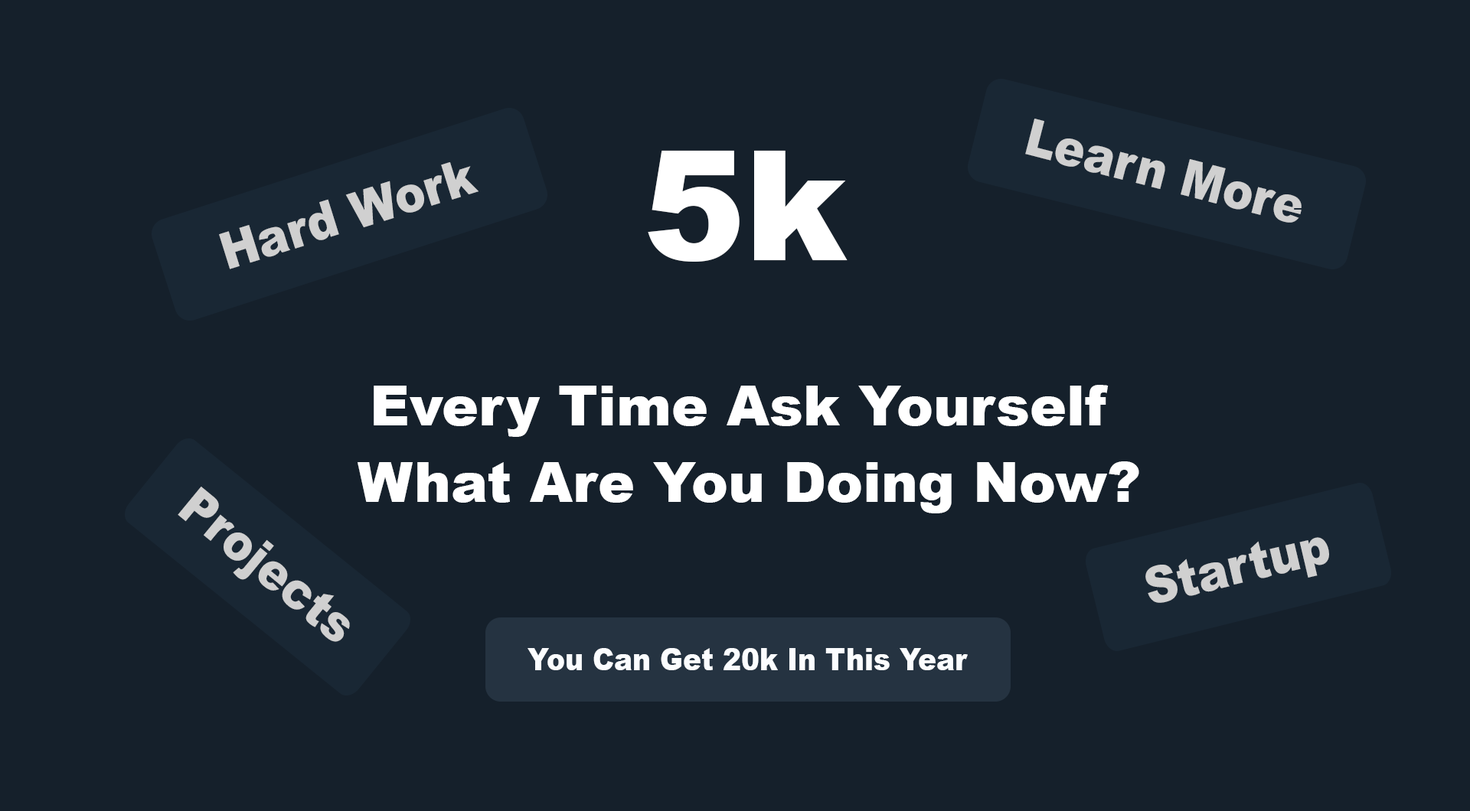
<style>
.page{position:relative;width:1470px;height:811px;background:#15202b}
.page>*{position:absolute;margin:0}
.t1{font:51.1px "Arial-Black";color:#d0d0d0;scale:0.9 1}
.t2{font:153.1px "Arial-Black";color:#ffffff}
.t3{font:51px "Arial-Black";color:#d0d0d0;scale:0.9 1}
.t4{font:55.1px/76.5px "Arial-Black";color:#ffffff}
.t5{font:30.6px "Arial-Black";color:#fbfdff;scale:0.9 1}
</style>
<div class="page">
<p class="t1" style="left:1025px;top:119px;width:276px;height:104px;rotate:15deg">Learn More</p>
<p class="t2" style="left:648px;top:150px;width:199px;height:112px">5k</p>
<p class="t3" style="left:219px;top:162px;width:259px;height:107px;rotate:-17deg">Hard Work</p>
<p class="t4" style="left:357px;top:385px;width:782px;height:129px;text-align:center">Every Time Ask Yourself <br>What Are You Doing Now?</p>
<p class="t3" style="left:178px;top:487px;width:172px;height:155px;rotate:39deg">Projects</p>
<p class="t3" style="left:1145px;top:537px;width:184px;height:66px;rotate:-13deg">Startup</p>
<p class="t5" style="left:527px;top:648px;width:441px;height:23px">You Can Get 20k In This Year</p>
</div>
